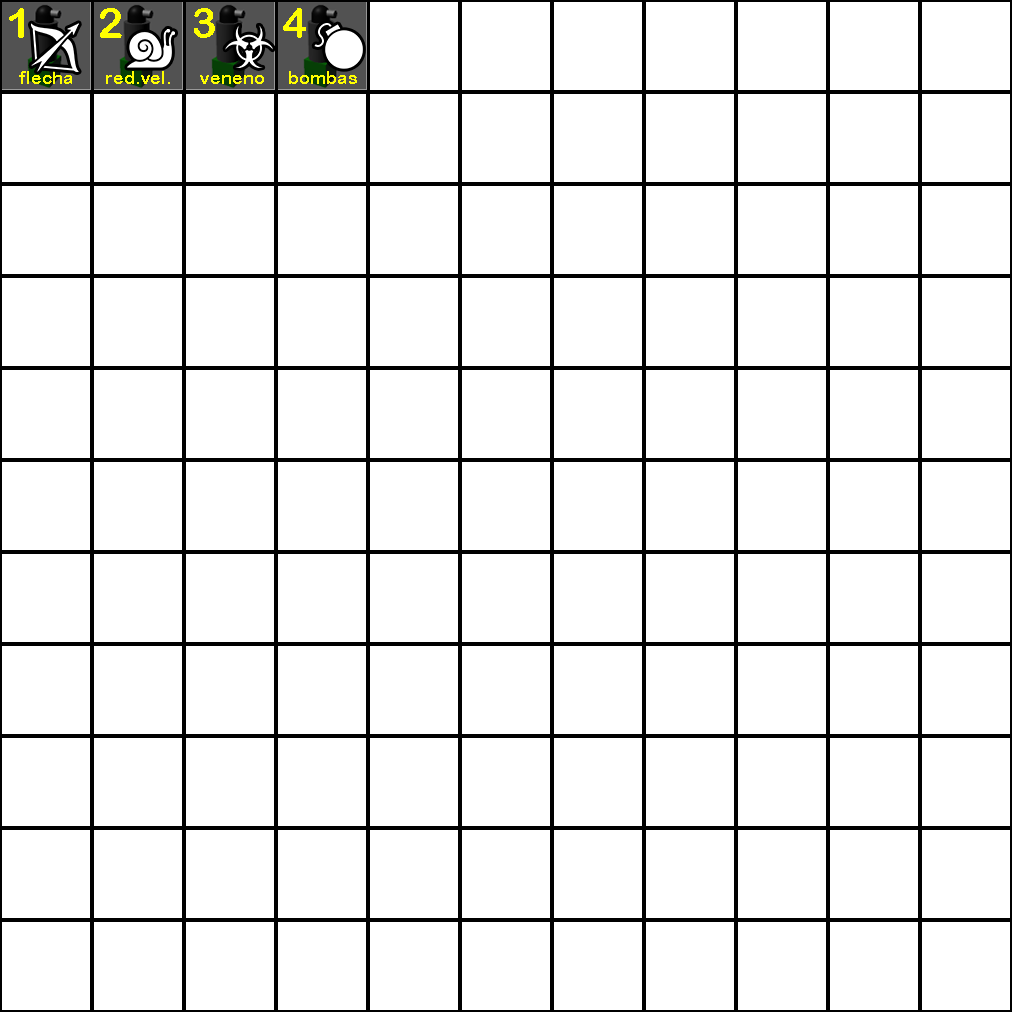
<style>
.page{position:relative;width:1012px;height:1012px;background:#ffffff}
.page>*{position:absolute;margin:0}
.t1{font:42px "ArialRoundedMTBold";color:#ffff00}
.t2{font:18px "ArialRoundedMTBold";color:#ffff00}
</style>
<div class="page">
<p class="t1" style="left:9px;top:8px;width:15px;height:30px">1</p>
<p class="t1" style="left:100px;top:8px;width:22px;height:30px">2</p>
<p class="t1" style="left:194px;top:8px;width:21px;height:30px">3</p>
<p class="t1" style="left:283px;top:8px;width:23px;height:30px">4</p>
<p class="t2" style="left:19px;top:71px;width:53px;height:13px">flecha</p>
<p class="t2" style="left:106px;top:71px;width:64px;height:13px">red.vel.</p>
<p class="t2" style="left:200px;top:75px;width:64px;height:9px">veneno</p>
<p class="t2" style="left:289px;top:71px;width:68px;height:13px">bombas</p>
</div>
